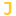
<style>
.page{position:relative;width:16px;height:16px;background:#ffffff}
.page>*{position:absolute;margin:0}
.t1{font:20px "Consolas-Bold";color:#ffcb2c}
</style>
<div class="page">
<p class="t1" style="left:4px;top:2px;width:8px;height:13px">J</p>
</div>
